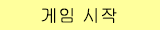
<style>
.page{position:relative;width:160px;height:30px;background:#ffff9c}
.page>*{position:absolute;margin:0}
.t1{font:18px "Gulim";color:#000000}
</style>
<div class="page">
<p class="t1" style="left:41px;top:8px;width:76px;height:15px">게임 시작</p>
</div>
